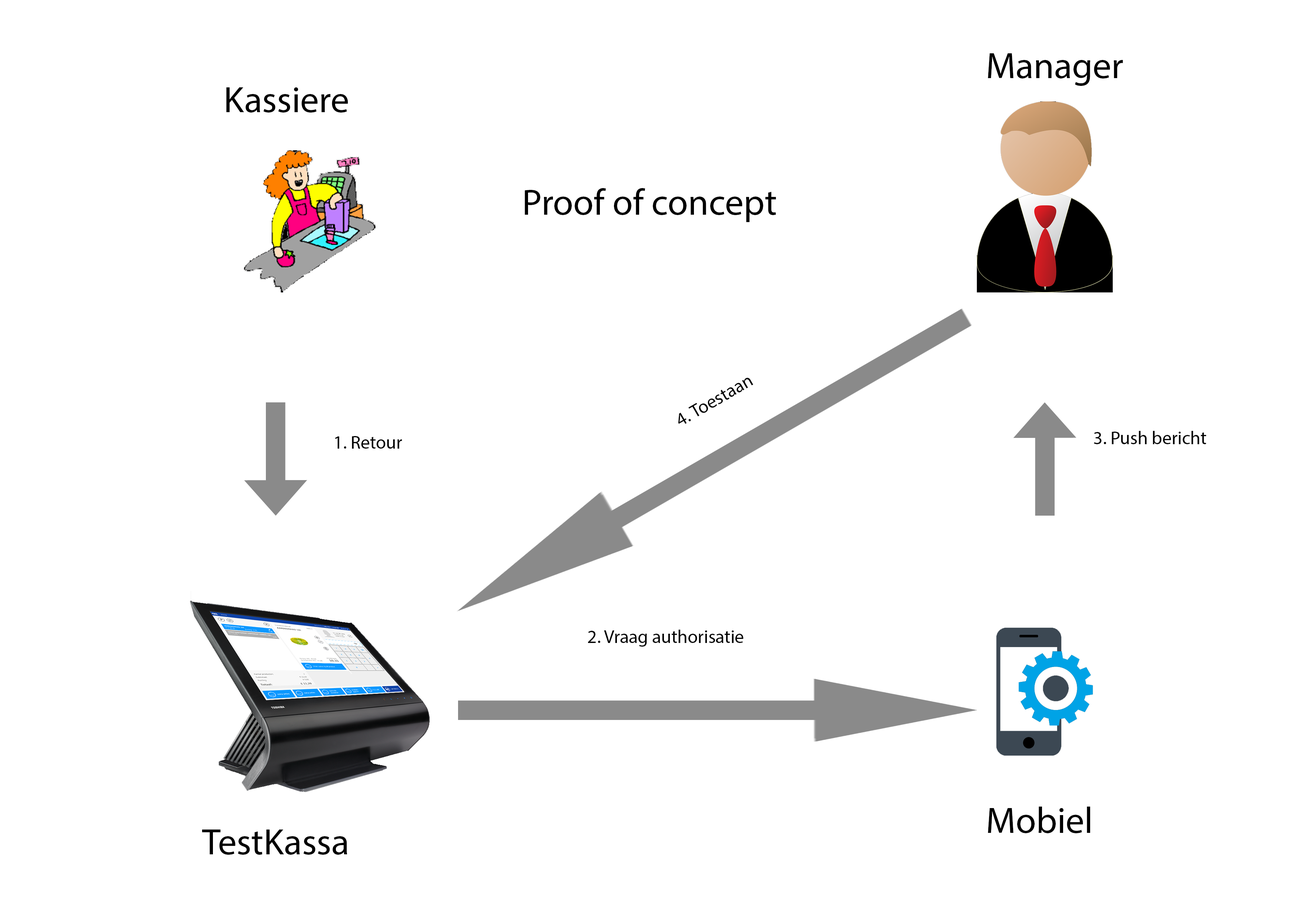
<style>
.page{position:relative;width:1299px;height:918px;background:#ffffff}
.page>*{position:absolute;margin:0}
.t1{font:37px "MyriadPro-Regular";color:#000000}
.t2{font:4.4px "MyriadPro-Regular";color:#000000}
</style>
<div class="page">
<p class="t1" style="left:988px;top:53px;width:135px;height:33px">Manager</p>
<p class="t1" style="left:226px;top:87px;width:122px;height:26px">Kassiere</p>
<p class="t1" style="left:525px;top:188px;width:251px;height:34px">Proof of concept</p>
<p class="t2" style="left:678px;top:378px;width:75px;height:46px;rotate:-30deg">4. Toestaan</p>
<p class="t2" style="left:335px;top:436px;width:67px;height:13px">1. Retour</p>
<p class="t2" style="left:1094px;top:431px;width:112px;height:13px">3. Push bericht</p>
<p class="t2" style="left:588px;top:630px;width:155px;height:17px">2. Vraag authorisatie</p>
<p class="t1" style="left:988px;top:807px;width:102px;height:26px">Mobiel</p>
<p class="t1" style="left:202px;top:830px;width:145px;height:25px">TestKassa</p>
</div>
